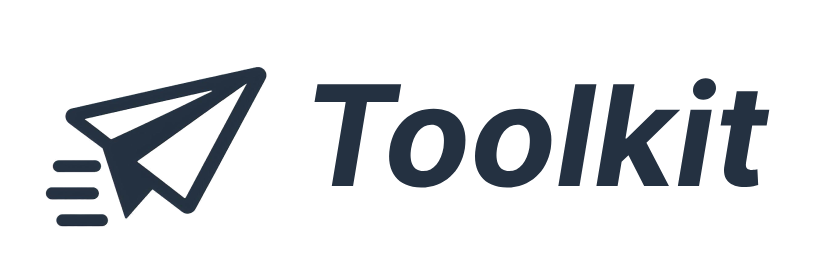
<style>
.page{position:relative;width:817px;height:266px;background:#ffffff}
.page>*{position:absolute;margin:0}
.t1{font:140px "Inter-BoldItalic";color:#243141}
</style>
<div class="page">
<p class="t1" style="left:314px;top:78px;width:456px;height:110px">Toolkit</p>
</div>
